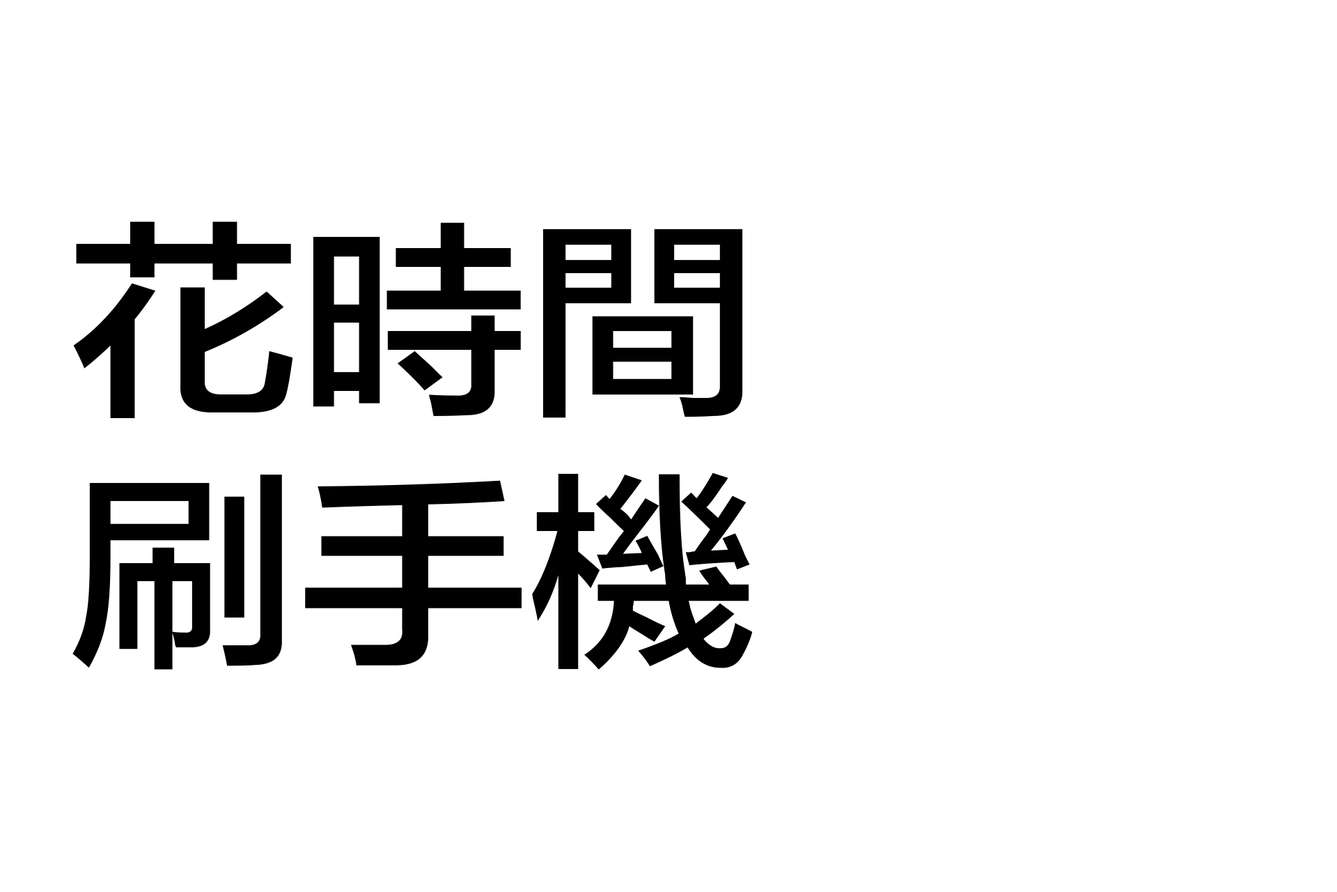
<style>
.page{position:relative;width:1337px;height:892px;background:#ffffff}
.page>*{position:absolute;margin:0}
.t1{font:209px "FZLTZHB--B51-0";color:#000000;text-transform:uppercase;scale:1.1 1}
</style>
<div class="page">
<p class="t1" style="left:72px;top:222px;width:681px;height:447px">花時間<br>刷手機</p>
</div>
